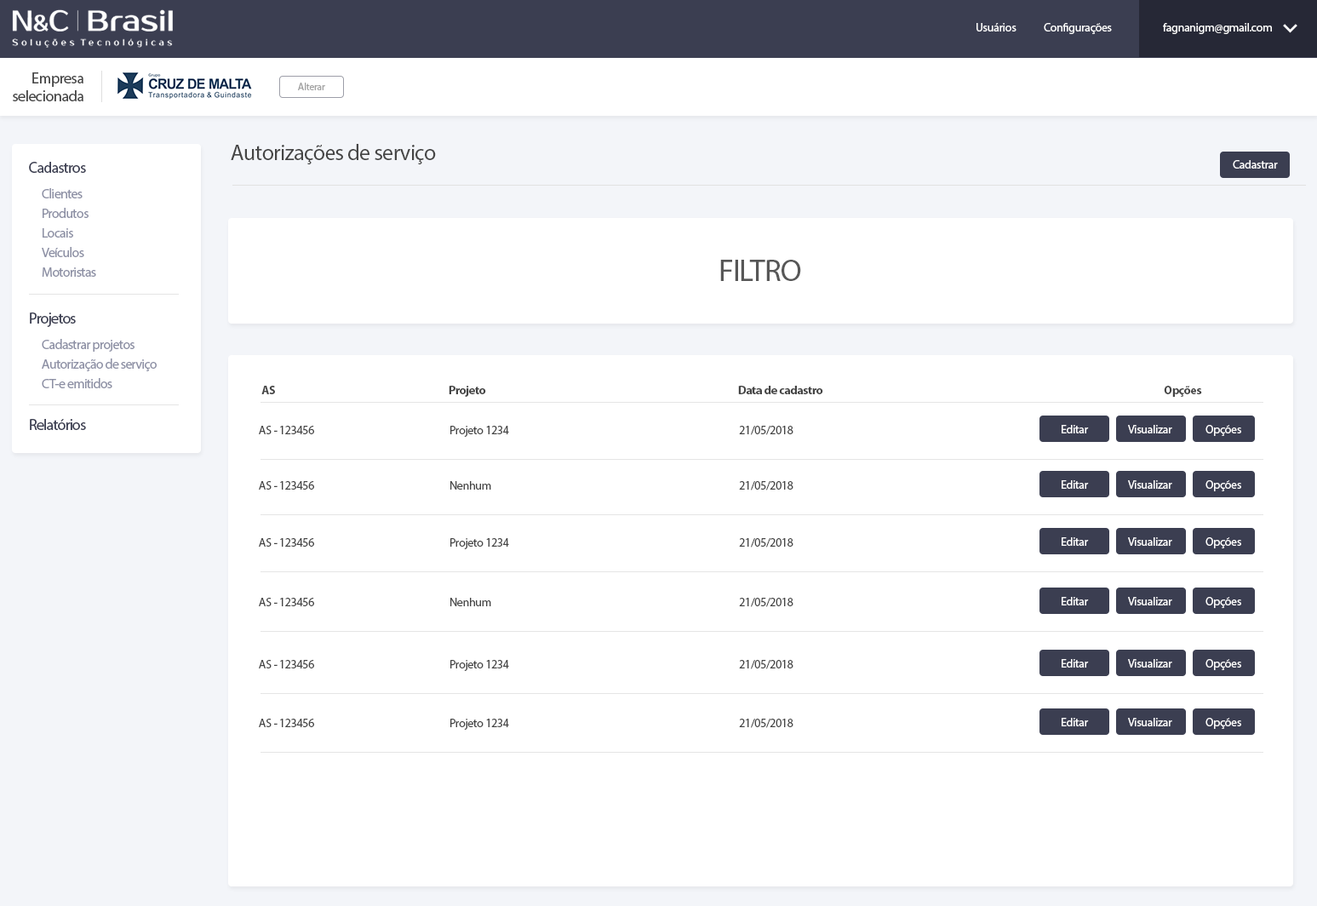
<style>
.page{position:relative;width:1317px;height:906px;background:#ffffff}
.page>*{position:absolute;margin:0}
.t1{font:11.9px "MyriadPro-Regular";letter-spacing:-0.025em;color:#ffffff}
.t2{font:15.3px/17.8px "MyriadPro-Regular";letter-spacing:-0.025em;color:#454545}
.t3{font:10.2px "MyriadPro-Regular";letter-spacing:-0.025em;color:#a2a2a2}
.t4{font:22.1px "MyriadPro-Regular";letter-spacing:-0.025em;color:#454545}
.t5{font:15.3px "MyriadPro-Regular";letter-spacing:-0.045em;color:#3b3e51}
.t6{font:13.6px "MyriadPro-Regular";letter-spacing:-0.045em;color:#8c8fa4}
.t7{font:30.6px "MyriadPro-Regular";letter-spacing:-0.025em;color:#575757}
.t8{font:13.6px "MyriadPro-Regular";letter-spacing:-0.045em;color:#8d90a5}
.t9{font:11.9px "MyriadPro-Bold";letter-spacing:-0.025em;color:#454545}
.t10{font:11.9px "MyriadPro-Regular";letter-spacing:-0.025em;color:#454545}
</style>
<div class="page">
<p class="t1" style="left:976px;top:23px;width:40px;height:8px">Usuários</p>
<p class="t1" style="left:1043px;top:23px;width:69px;height:11px">Configurações</p>
<p class="t1" style="left:1163px;top:23px;width:109px;height:11px">fagnanigm@gmail.com</p>
<p class="t2" style="left:13px;top:72px;width:70px;height:29px;text-align:right">Empresa<br>selecionada</p>
<p class="t3" style="left:298px;top:83px;width:27px;height:7px">Alterar</p>
<p class="t4" style="left:231px;top:144px;width:205px;height:20px">Autorizações de serviço</p>
<p class="t5" style="left:29px;top:162px;width:57px;height:11px">Cadastros</p>
<p class="t1" style="left:1232px;top:160px;width:46px;height:9px">Cadastrar</p>
<p class="t6" style="left:42px;top:188px;width:41px;height:10px">Clientes</p>
<p class="t6" style="left:43px;top:208px;width:46px;height:10px">Produtos</p>
<p class="t6" style="left:43px;top:228px;width:30px;height:9px">Locais</p>
<p class="t6" style="left:42px;top:247px;width:42px;height:10px">Veículos</p>
<p class="t6" style="left:42px;top:267px;width:54px;height:10px">Motoristas</p>
<p class="t7" style="left:720px;top:260px;width:81px;height:21px">FILTRO</p>
<p class="t5" style="left:30px;top:312px;width:46px;height:15px">Projetos</p>
<p class="t6" style="left:42px;top:339px;width:92px;height:13px">Cadastrar projetos</p>
<p class="t8" style="left:42px;top:358px;width:115px;height:13px">Autorização de serviço</p>
<p class="t6" style="left:42px;top:378px;width:70px;height:10px">CT-e emitidos</p>
<p class="t9" style="left:261px;top:386px;width:14px;height:8px">AS</p>
<p class="t9" style="left:449px;top:386px;width:37px;height:11px">Projeto</p>
<p class="t9" style="left:738px;top:386px;width:85px;height:8px">Data de cadastro</p>
<p class="t9" style="left:1164px;top:386px;width:38px;height:11px">Opções</p>
<p class="t5" style="left:30px;top:419px;width:56px;height:11px">Relatórios</p>
<p class="t10" style="left:259px;top:426px;width:55px;height:8px">AS - 123456</p>
<p class="t10" style="left:450px;top:426px;width:59px;height:11px">Projeto 1234</p>
<p class="t10" style="left:739px;top:426px;width:54px;height:9px">21/05/2018</p>
<p class="t1" style="left:1061px;top:425px;width:28px;height:8px">Editar</p>
<p class="t1" style="left:1128px;top:425px;width:44px;height:8px">Visualizar</p>
<p class="t1" style="left:1205px;top:425px;width:36px;height:11px">Opções</p>
<p class="t10" style="left:259px;top:481px;width:55px;height:8px">AS - 123456</p>
<p class="t10" style="left:450px;top:481px;width:41px;height:8px">Nenhum</p>
<p class="t10" style="left:739px;top:481px;width:54px;height:9px">21/05/2018</p>
<p class="t1" style="left:1061px;top:480px;width:28px;height:9px">Editar</p>
<p class="t1" style="left:1128px;top:480px;width:44px;height:9px">Visualizar</p>
<p class="t1" style="left:1205px;top:480px;width:36px;height:11px">Opções</p>
<p class="t10" style="left:259px;top:538px;width:55px;height:8px">AS - 123456</p>
<p class="t10" style="left:450px;top:538px;width:59px;height:11px">Projeto 1234</p>
<p class="t10" style="left:739px;top:538px;width:54px;height:9px">21/05/2018</p>
<p class="t1" style="left:1061px;top:537px;width:28px;height:9px">Editar</p>
<p class="t1" style="left:1128px;top:537px;width:44px;height:9px">Visualizar</p>
<p class="t1" style="left:1205px;top:537px;width:36px;height:11px">Opções</p>
<p class="t10" style="left:259px;top:598px;width:55px;height:8px">AS - 123456</p>
<p class="t10" style="left:450px;top:598px;width:41px;height:8px">Nenhum</p>
<p class="t10" style="left:739px;top:598px;width:54px;height:9px">21/05/2018</p>
<p class="t1" style="left:1061px;top:597px;width:28px;height:8px">Editar</p>
<p class="t1" style="left:1128px;top:597px;width:44px;height:8px">Visualizar</p>
<p class="t1" style="left:1205px;top:597px;width:36px;height:11px">Opções</p>
<p class="t10" style="left:259px;top:660px;width:55px;height:8px">AS - 123456</p>
<p class="t10" style="left:450px;top:660px;width:59px;height:11px">Projeto 1234</p>
<p class="t10" style="left:739px;top:660px;width:54px;height:9px">21/05/2018</p>
<p class="t1" style="left:1061px;top:659px;width:28px;height:8px">Editar</p>
<p class="t1" style="left:1128px;top:659px;width:44px;height:8px">Visualizar</p>
<p class="t1" style="left:1205px;top:659px;width:36px;height:11px">Opções</p>
<p class="t10" style="left:259px;top:718px;width:55px;height:9px">AS - 123456</p>
<p class="t10" style="left:450px;top:718px;width:59px;height:11px">Projeto 1234</p>
<p class="t10" style="left:739px;top:718px;width:54px;height:10px">21/05/2018</p>
<p class="t1" style="left:1061px;top:718px;width:28px;height:8px">Editar</p>
<p class="t1" style="left:1128px;top:718px;width:44px;height:8px">Visualizar</p>
<p class="t1" style="left:1205px;top:718px;width:36px;height:11px">Opções</p>
</div>
